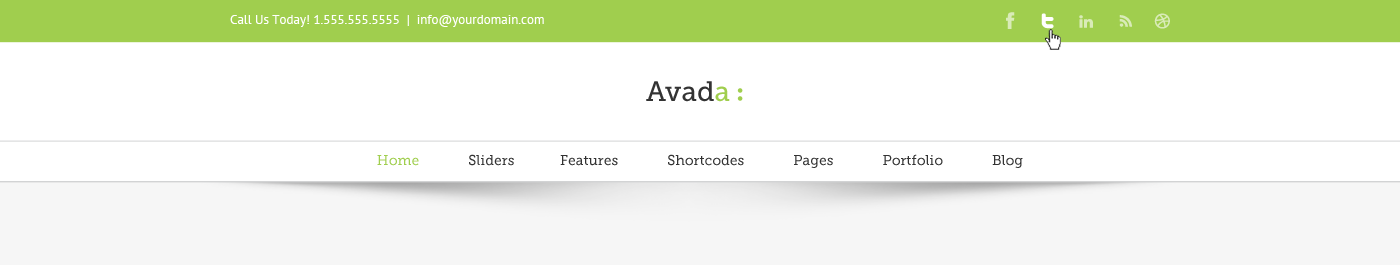
<style>
.page{position:relative;width:1400px;height:265px;background:#ffffff}
.page>*{position:absolute;margin:0}
.t1{font:13px "PTSans-Regular";color:#ffffff}
.t2{font:28px "MuseoSlab-500";color:#333333}
.t3{font:28px "MuseoSlab-500";color:#a0ce4e}
.t4{font:14px "MuseoSlab-500";color:#333333}
.t5{font:14px "MuseoSlab-500";color:#a0ce4e}
</style>
<div class="page">
<p class="t1" style="left:230px;top:15px;width:314px;height:12px">Call Us Today! 1.555.555.5555  |  info@yourdomain.com</p>
<p class="t2" style="left:646px;top:81px;width:84px;height:21px">Avad<span class="t3">a</span></p>
<p class="t4" style="left:377px;top:154px;width:646px;height:14px"><span class="t5">Home              </span>Sliders             Features              Shortcodes              Pages              Portfolio              Blog</p>
</div>
